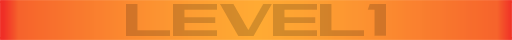
<style>
.page{position:relative;width:512px;height:40px}
.page>*{position:absolute;margin:0}
.t1{font:48px "2051PLASTIC-ALP50";color:#d2832a}
</style>
<div class="page">
<p class="t1" style="left:126px;top:4px;width:260px;height:32px">LEVEL1</p>
</div>
